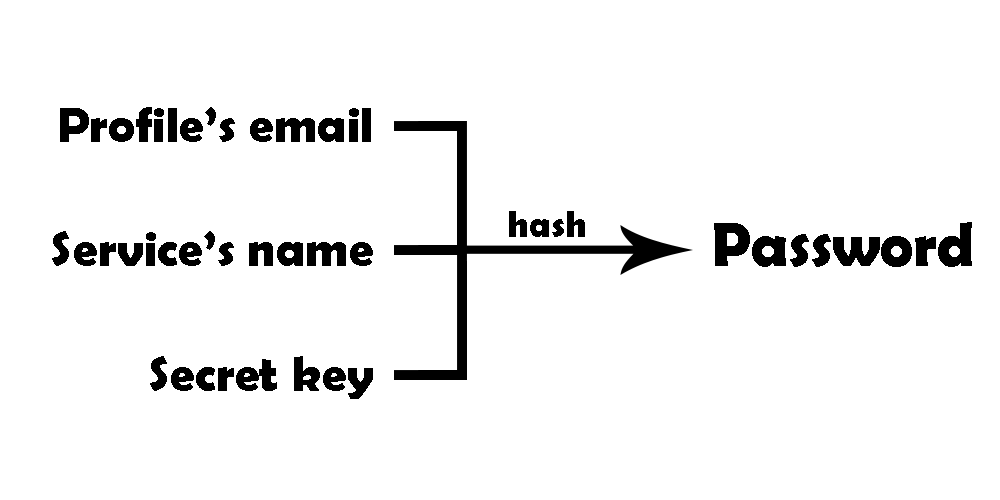
<style>
.page{position:relative;width:1000px;height:500px;background:#ffffff}
.page>*{position:absolute;margin:0}
.t1{font:50px "BerlinSansFBDemi-Bold";color:#000000}
.t2{font:37.5px "BerlinSansFBDemi-Bold";color:#000000}
.t3{font:62.5px "BerlinSansFBDemi-Bold";color:#000000}
</style>
<div class="page">
<p class="t1" style="left:60px;top:107px;width:311px;height:35px">Profile’s email</p>
<p class="t2" style="left:509px;top:211px;width:76px;height:26px">hash</p>
<p class="t3" style="left:714px;top:222px;width:258px;height:45px">Password</p>
<p class="t1" style="left:52px;top:231px;width:321px;height:35px">Service’s name</p>
<p class="t1" style="left:150px;top:356px;width:223px;height:43px">Secret key</p>
</div>
